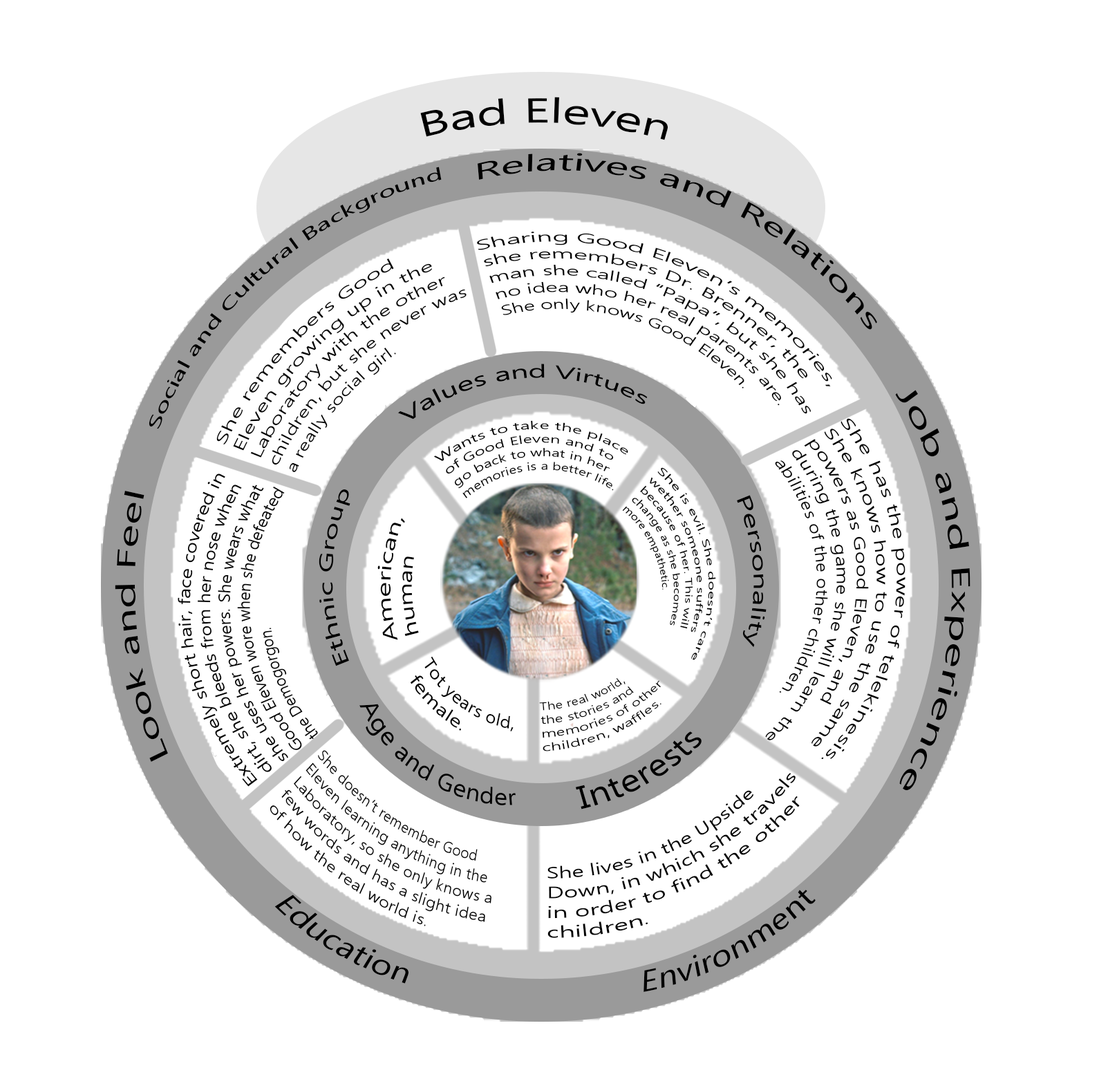
<style>
.page{position:relative;width:1108px;height:1077px;background:#ffffff}
.page>*{position:absolute;margin:0}
.t1{font:34.5px "Ebrima";color:#000000}
.t2{font:27px "Ebrima";color:#000000;scale:1.17 1}
.t3{font:17.3px "Ebrima";color:#000000;scale:1.17 1}
.t4{font:14.4px "Ebrima";color:#000000;scale:1.21 1}
.t5{font:15.8px "Ebrima";color:#000000;scale:1.17 1}
.t6{font:18.7px "Ebrima";color:#000000}
.t7{font:11.5px "Ebrima";color:#000000}
.t8{font:17.3px "Ebrima";color:#000000;scale:0.93 1}
.t9{font:15.8px "Ebrima";color:#000000;scale:0.83 1}
.t10{font:10.1px "Ebrima";color:#000000}
.t11{font:17.3px "Ebrima";color:#000000}
.t12{font:16.6px "Ebrima";color:#000000;scale:0.96 1}
.t13{font:10.8px "Ebrima";color:#000000;scale:0.96 1}
.t14{font:22.8px "Ebrima";color:#000000;scale:0.96 1}
.t15{font:30.6px "Ebrima";color:#000000;scale:0.96 1}
.t16{font:15.8px "Ebrima";color:#000000;scale:0.9 1}
.t17{font:17.3px "Ebrima";color:#000000;scale:1.18 1}
</style>
<div class="page">
<p class="t1" style="left:420px;top:97px;width:247px;height:43px;rotate:30deg">Bad Eleven</p>
<p class="t2" style="left:477px;top:153px;width:400px;height:177px;rotate:22deg">Relatives and Relations</p>
<p class="t3" style="left:149px;top:167px;width:293px;height:262px;rotate:-39deg">Social and Cultural Background</p>
<p class="t4" style="left:477px;top:231px;width:355px;height:183px;rotate:24deg">Sharing Good Eleven’s memories, she remembers Dr. Brenner, the man she called “Papa”, but she has no idea who her real parents are. She only knows Good Eleven.</p>
<p class="t5" style="left:216px;top:258px;width:250px;height:214px;rotate:-35deg">She remembers Good<br>Eleven growing up in the<br>Laboratory with the other<br>children, but she never was<br>a really social girl.</p>
<p class="t6" style="left:397px;top:363px;width:250px;height:56px">Values and Virtues</p>
<p class="t2" style="left:895px;top:390px;width:75px;height:400px;rotate:97deg">Job and Experience</p>
<p class="t7" style="left:433px;top:420px;width:195px;height:78px">Wants to take the place of Good Eleven and to<br>go back to what in her<br>memories is a better life.</p>
<p class="t8" style="left:765px;top:418px;width:140px;height:341px;rotate:99deg">She has the power of telekinesis. She knows how to use the same powers as Good Eleven, and<br>during the game she will learn the abilities of the other children.</p>
<p class="t9" style="left:178px;top:473px;width:140px;height:313px;rotate:-92deg">Extremely short hair, face covered in dirt, she bleeds from her nose when<br>she uses her powers. She wears what Good Eleven wore when she defeated the Demogorgon.</p>
<p class="t10" style="left:622px;top:467px;width:94px;height:193px;rotate:80deg">She is evil. She doesn’t care wether someone suffers<br>because of her. This will change as she becomes more empathetic.</p>
<p class="t2" style="left:115px;top:491px;width:53px;height:270px;rotate:-83deg">Look and Feel</p>
<p class="t6" style="left:319px;top:489px;width:31px;height:177px;rotate:-75deg">Ethnic Group</p>
<p class="t6" style="left:737px;top:495px;width:29px;height:152px;rotate:105deg">Personality</p>
<p class="t11" style="left:377px;top:518px;width:42px;height:122px;rotate:-68deg">American, <br>human</p>
<p class="t12" style="left:410px;top:656px;width:103px;height:75px;rotate:20deg">Tot years old,<br> female.</p>
<p class="t13" style="left:539px;top:678px;width:122px;height:73px;rotate:-45deg">The real world,<br>the stories and<br>memories of other<br>children, waffles.</p>
<p class="t14" style="left:359px;top:703px;width:156px;height:102px;rotate:20deg">Age and Gender</p>
<p class="t15" style="left:575px;top:731px;width:126px;height:78px;rotate:-57deg">Interests</p>
<p class="t16" style="left:269px;top:750px;width:222px;height:176px;rotate:29deg">She doesn’t remember Good Eleven learning anything in the Laboratory, so she only knows a few words and has a slight idea<br>of how the real world is.</p>
<p class="t17" style="left:547px;top:773px;width:252px;height:165px;rotate:-27deg">She lives in the Upside Down, in which she travels in order to find the other children.</p>
<p class="t2" style="left:643px;top:889px;width:172px;height:103px;rotate:-43deg">Environment</p>
<p class="t2" style="left:274px;top:894px;width:134px;height:89px;rotate:12deg">Education</p>
</div>
